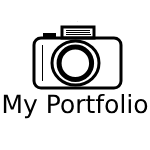
<style>
.page{position:relative;width:150px;height:150px;background:#ffffff}
.page>*{position:absolute;margin:0}
.t1{font:25px "Constantia";color:#000000}
</style>
<div class="page">
<p class="t1" style="left:3px;top:94px;width:145px;height:25px">My Portfolio</p>
</div>
